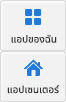
<style>
.page{position:relative;width:66px;height:102px;background:#f2f2f2}
.page>*{position:absolute;margin:0}
.t1{font:10px "NotoSansThai-Regular";color:#333333}
</style>
<div class="page">
<p class="t1" style="left:11px;top:34px;width:46px;height:9px">แอปของฉัน</p>
<p class="t1" style="left:7px;top:85px;width:53px;height:9px">แอปเซนเตอร์</p>
</div>
